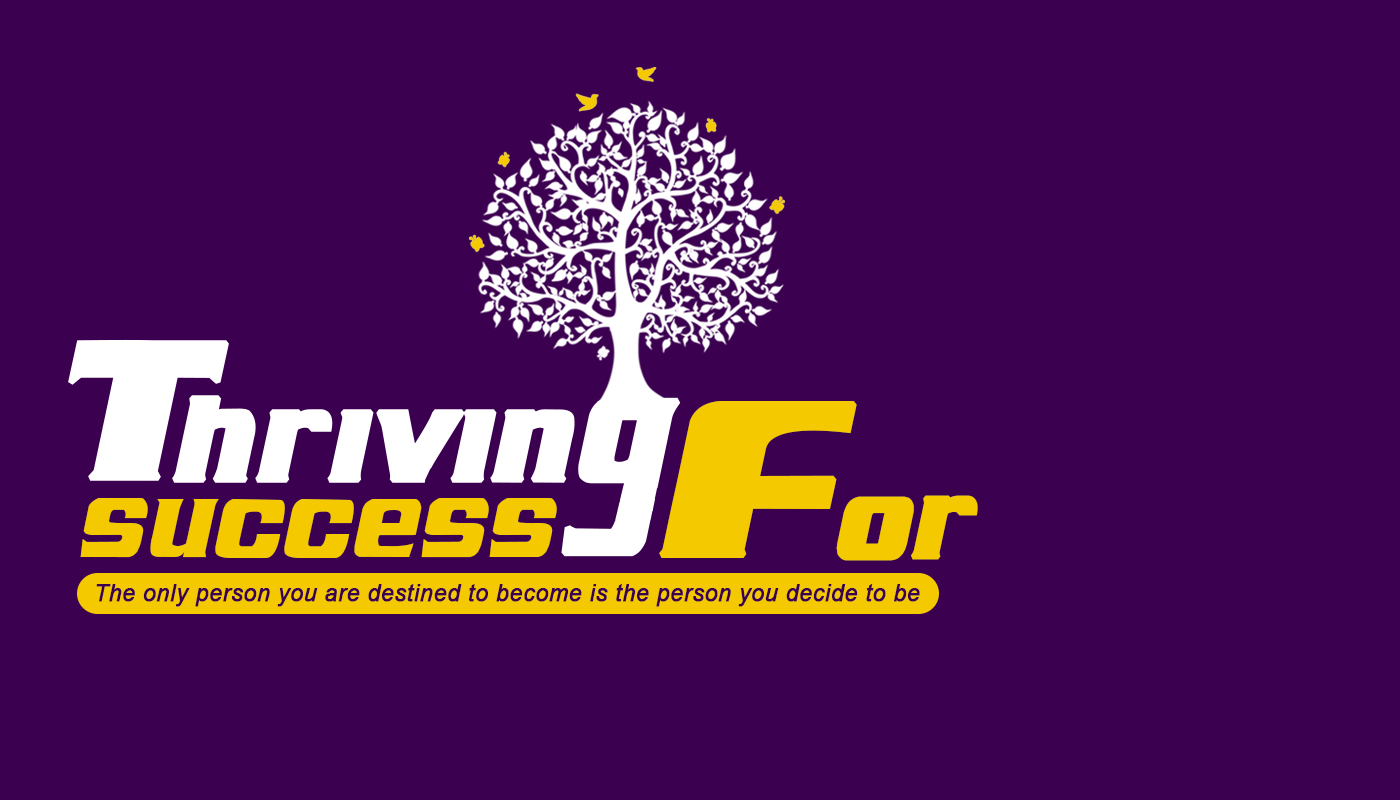
<style>
.page{position:relative;width:1400px;height:800px;background:#3b0150}
.page>*{position:absolute;margin:0}
.t1{font:173.3px "AirMillhouseItalic";color:#f4c900;font-weight:bold}
.t2{font:220px "AirMillhouseItalic";color:#f4c900;font-weight:bold}
.t3{font:170.6px "AirMillhouseItalic";color:#f4c900}
.t4{font:22.7px "Arial-ItalicMT";letter-spacing:0.015em;color:#3b0150;font-weight:bold}
</style>
<div class="page">
<p class="t1" style="left:659px;top:401px;width:319px;height:160px"><span class="t2">F</span>or</p>
<p class="t3" style="left:80px;top:498px;width:477px;height:60px">success</p>
<p class="t4" style="left:96px;top:584px;width:824px;height:23px">The only person you are destined to become is the person you decide to be</p>
</div>
